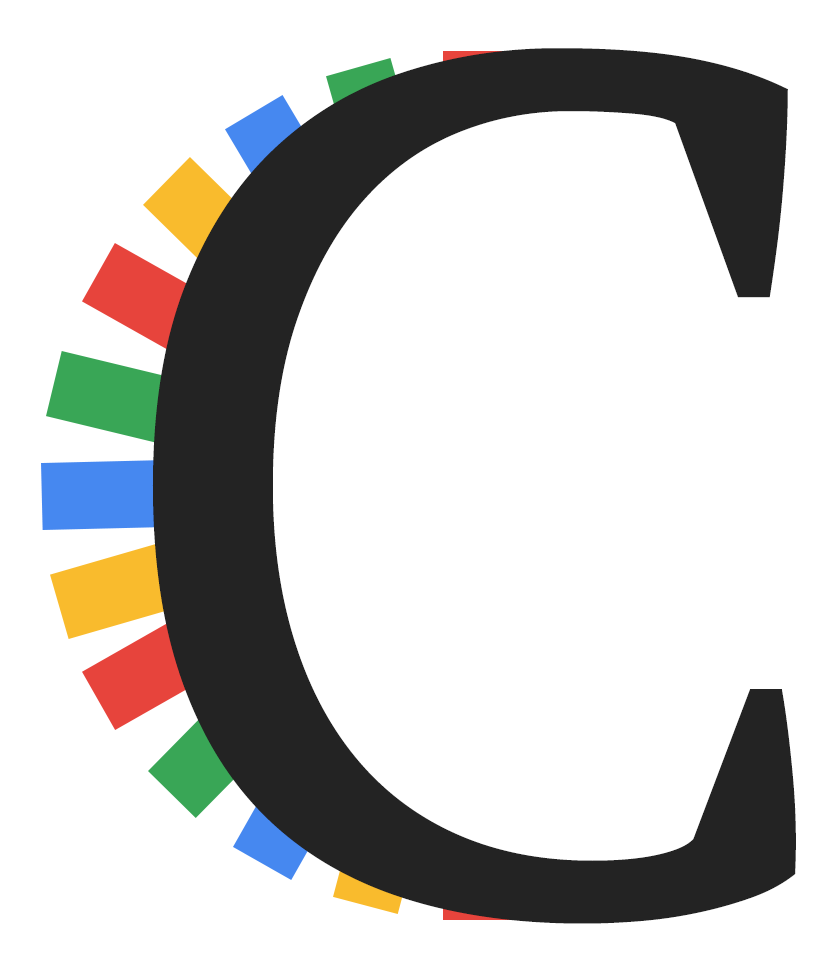
<style>
.page{position:relative;width:825px;height:971px;background:#ffffff}
.page>*{position:absolute;margin:0}
.t1{font:1208.9px "PTSerif-Regular";color:#232323}
</style>
<div class="page">
<p class="t1" style="left:152px;top:48px;width:644px;height:876px">C</p>
</div>
